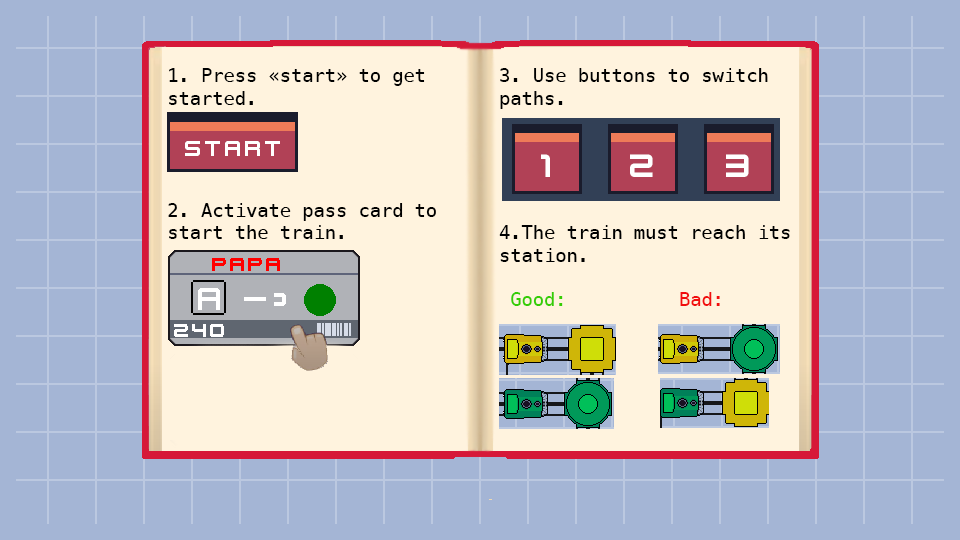
<style>
.page{position:relative;width:960px;height:540px;background:#a4b5d5}
.page>*{position:absolute;margin:0}
.t1{font:18.7px "Menlo-Regular";color:#000000}
.t2{font:18.7px "Menlo-Regular";color:#35cd03}
.t3{font:18.7px "Menlo-Regular";color:#f10d0d}
</style>
<div class="page">
<p class="t1" style="left:168px;top:68px;width:268px;height:171px">1. Press «start» to get started.<br><br><br><br><br>2. Activate pass card to start the train.</p>
<p class="t1" style="left:499px;top:68px;width:291px;height:238px">3. Use buttons to switch paths.<br><br><br><br><br><br>4.The train must reach its station.<br><br> <span class="t2">Good:    </span><span class="t3">Bad:</span></p>
</div>
